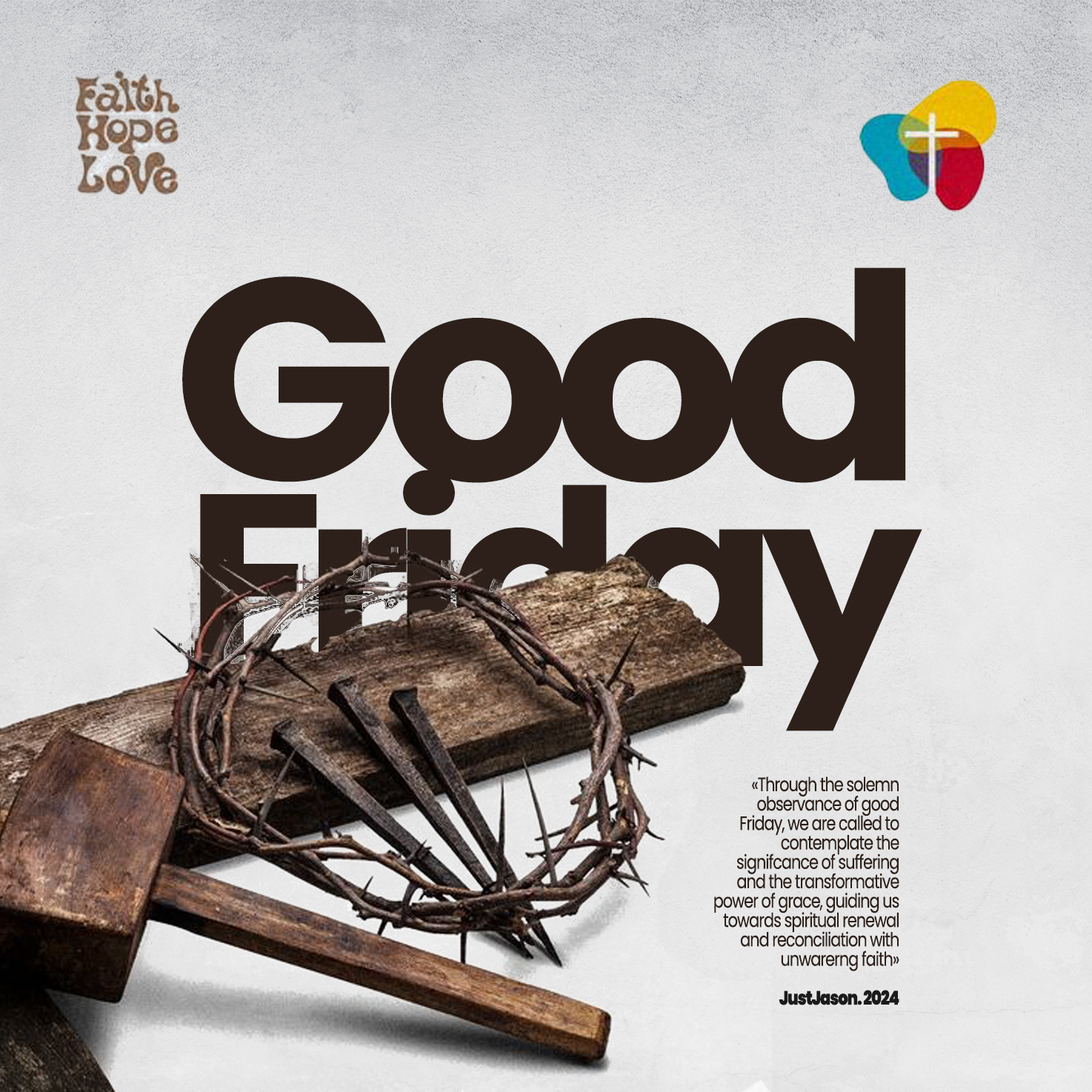
<style>
.page{position:relative;width:1092px;height:1092px}
.page>*{position:absolute;margin:0}
.t1{font:286.9px "Poppins-Bold";letter-spacing:-0.05em;color:#2d201a;scale:1.04 1}
.t2{font:244.5px "Poppins-Bold";letter-spacing:-0.05em;color:#2d201a;scale:1.04 1}
.t3{font:19.4px/19.4px "Poppins-Regular";letter-spacing:-0.05em;color:#2d201a;scale:0.8 1}
.t4{font:19.4px/19.4px "Poppins-Black";letter-spacing:-0.05em;color:#1b1b1b;scale:0.8 1}
</style>
<div class="page">
<p class="t1" style="left:182px;top:267px;width:724px;height:216px">Good</p>
<p class="t2" style="left:200px;top:470px;width:722px;height:261px">Friday</p>
<p class="t3" style="left:714px;top:776px;width:185px;height:229px;text-align:right">«Through the solemn observance of good Friday, we are called to contemplate the signifcance of suffering and the transformative  power of grace, guiding us towards spiritual renewal  and reconciliation with unwarerng faith»<br><br><span class="t4">JustJason. 2024</span></p>
</div>
